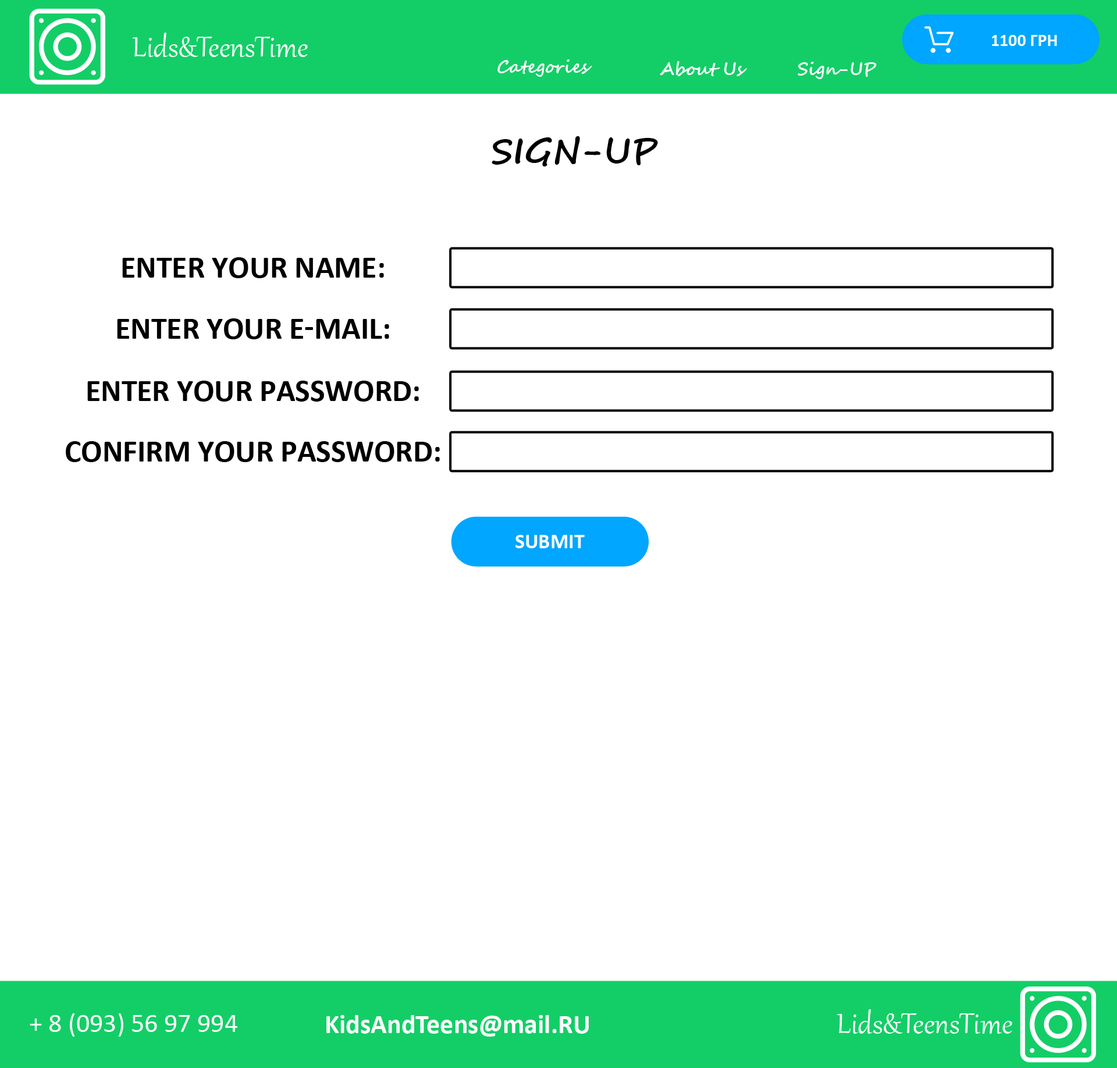
<style>
.page{position:relative;width:1117px;height:1068px;background:#ffffff}
.page>*{position:absolute;margin:0}
.t1{font:34.9px "Gabriola";color:#ffffff}
.t2{font:17.5px "Calibri-Bold";color:#ffffff}
.t3{font:17.5px "SegoeScript-Bold";color:#ffffff}
.t4{font:34.9px "SegoeScript-Bold";color:#000000}
.t5{font:31.3px "Calibri-Bold";color:#000000;text-transform:uppercase}
.t6{font:20.9px "Calibri-Bold";color:#ffffff}
.t7{font:26.8px "Calibri";color:#ffffff}
.t8{font:26.8px "Calibri-Bold";color:#ffffff}
</style>
<div class="page">
<p class="t1" style="left:132px;top:33px;width:176px;height:24px">Lids&amp;TeensTime</p>
<p class="t2" style="left:992px;top:35px;width:65px;height:11px">1100 ГРН</p>
<p class="t3" style="left:497px;top:59px;width:95px;height:18px">Categories</p>
<p class="t3" style="left:660px;top:61px;width:87px;height:15px">About Us</p>
<p class="t3" style="left:798px;top:62px;width:79px;height:17px">Sign-UP</p>
<p class="t4" style="left:492px;top:136px;width:166px;height:30px">SIGN-UP</p>
<p class="t5" style="left:122px;top:257px;width:262px;height:21px">eNTER YOUR NAME:</p>
<p class="t5" style="left:117px;top:318px;width:272px;height:21px">eNTER YOUR E-MAIL:</p>
<p class="t5" style="left:87px;top:380px;width:332px;height:21px">eNTER YOUR PASSWORD:</p>
<p class="t5" style="left:66px;top:441px;width:374px;height:21px">CONFIRM YOUR PASSWORD:</p>
<p class="t6" style="left:515px;top:535px;width:70px;height:13px">SUBMIT</p>
<p class="t7" style="left:30px;top:1013px;width:207px;height:23px">+ 8 (093) 56 97 994</p>
<p class="t1" style="left:837px;top:1009px;width:175px;height:24px">Lids&amp;TeensTime</p>
<p class="t8" style="left:326px;top:1015px;width:263px;height:21px">KidsAndTeens@mail.RU</p>
</div>
